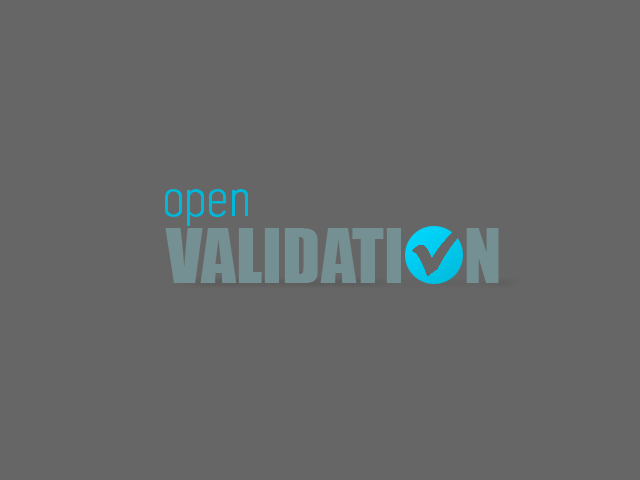
<style>
.page{position:relative;width:640px;height:480px;background:#666666}
.page>*{position:absolute;margin:0}
.t1{font:48px "Selena";color:#00b9da}
.t2{font:69px "Impact";color:#749093}
</style>
<div class="page">
<p class="t1" style="left:165px;top:189px;width:83px;height:37px">open</p>
<p class="t2" style="left:165px;top:228px;width:334px;height:55px">VALIDATI     N</p>
</div>
